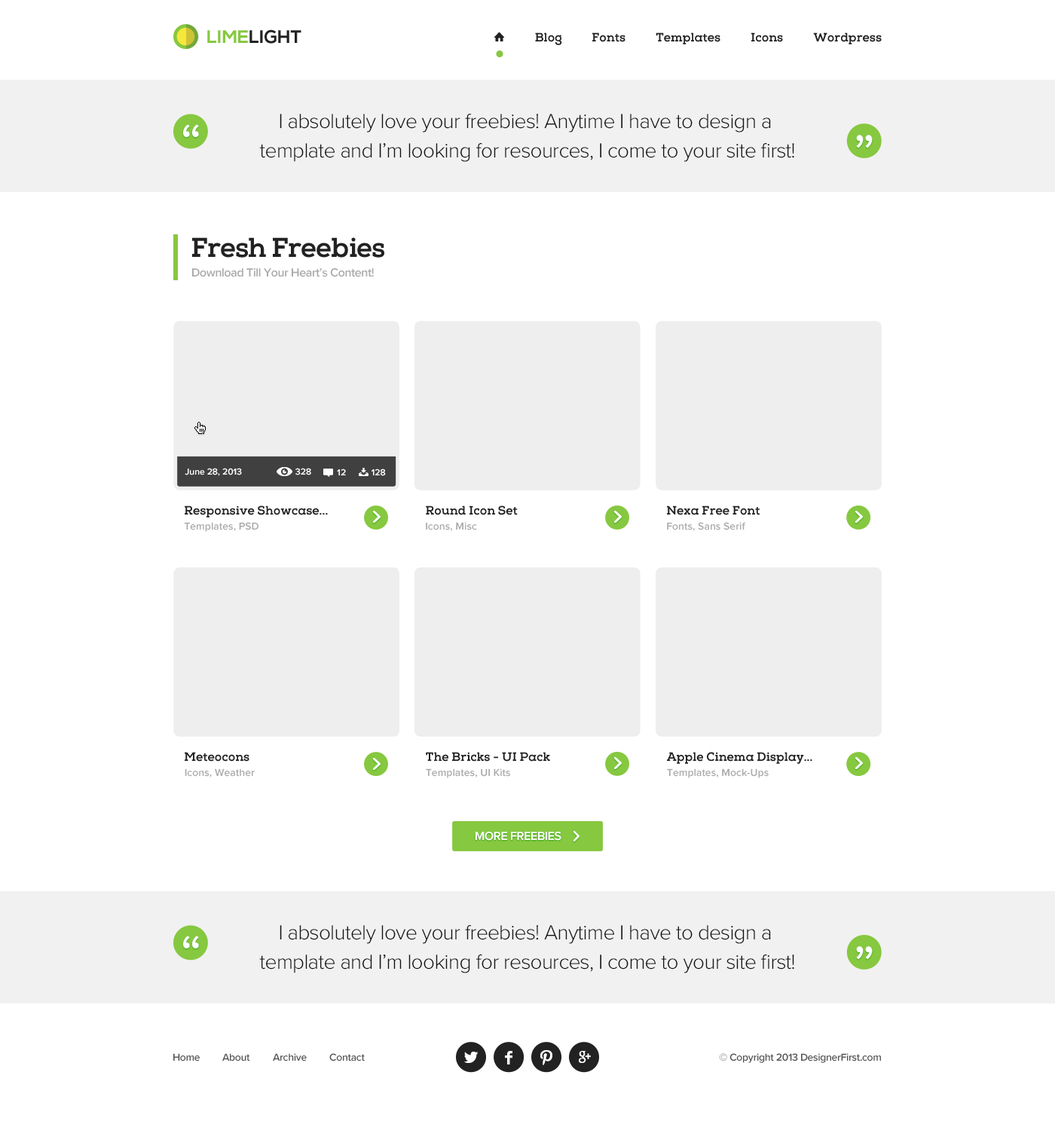
<style>
.page{position:relative;width:1055px;height:1130px;background:#ffffff}
.page>*{position:absolute;margin:0}
.t1{font:18.1px "NexaBold";color:#222222;text-transform:uppercase}
.t2{font:18.1px "NexaBold";color:#86c840;text-transform:uppercase}
.t3{font:12.1px "NexaSlab-xBold";color:#222222}
.t4{font:21.1px "ProximaNova-Light";letter-spacing:-0.025em;color:#111111}
.t5{font:56.5px "ProximaNova-Regular";letter-spacing:-0.025em;color:#ffffff}
.t6{font:27.1px "NexaSlab-xBold";letter-spacing:-0.025em;color:#222222}
.t7{font:12.1px "ProximaNova-Semibold";letter-spacing:-0.025em;color:#aaaaaa}
.t8{font:9px "ProximaNova-Semibold";color:#ffffff}
.t9{font:10.5px "ProximaNova-Semibold";color:#aaaaaa}
.t10{font:12.1px "ProximaNova-Semibold";letter-spacing:-0.025em;color:#ffffff;text-transform:uppercase}
.t11{font:10.5px "ProximaNova-Semibold";letter-spacing:-0.025em;color:#555555}
</style>
<div class="page">
<p class="t1" style="left:207px;top:29px;width:94px;height:15px"><span class="t2">Lime</span>Light</p>
<p class="t3" style="left:535px;top:32px;width:27px;height:13px">Blog</p>
<p class="t3" style="left:592px;top:32px;width:33px;height:10px">Fonts</p>
<p class="t3" style="left:656px;top:32px;width:64px;height:12px">Templates</p>
<p class="t3" style="left:751px;top:32px;width:32px;height:10px">Icons</p>
<p class="t3" style="left:813px;top:32px;width:69px;height:12px">Wordpress</p>
<p class="t4" style="left:259px;top:114px;width:535px;height:48px;text-align:center">I absolutely love your freebies! Anytime I have to design a <br>template and I’m looking for resources, I come to your site first!</p>
<p class="t5" style="left:183px;top:124px;width:16px;height:13px">“</p>
<p class="t5" style="left:856px;top:135px;width:17px;height:13px">”</p>
<p class="t6" style="left:192px;top:237px;width:192px;height:21px">Fresh Freebies</p>
<p class="t7" style="left:192px;top:268px;width:182px;height:9px">Download Till Your Heart’s Content!</p>
<p class="t8" style="left:185px;top:468px;width:57px;height:8px">June 28, 2013</p>
<p class="t8" style="left:295px;top:468px;width:16px;height:7px">328</p>
<p class="t8" style="left:337px;top:469px;width:9px;height:6px">12</p>
<p class="t8" style="left:371px;top:469px;width:15px;height:7px">128</p>
<p class="t3" style="left:185px;top:506px;width:143px;height:12px">Responsive Showcase...</p>
<p class="t3" style="left:426px;top:506px;width:92px;height:9px">Round Icon Set</p>
<p class="t3" style="left:667px;top:506px;width:93px;height:9px">Nexa Free Font</p>
<p class="t9" style="left:184px;top:522px;width:74px;height:10px">Templates, PSD</p>
<p class="t9" style="left:426px;top:522px;width:51px;height:9px">Icons, Misc</p>
<p class="t9" style="left:667px;top:522px;width:78px;height:9px">Fonts, Sans Serif</p>
<p class="t3" style="left:185px;top:752px;width:64px;height:10px">Meteocons</p>
<p class="t3" style="left:426px;top:752px;width:124px;height:10px">The Bricks - UI Pack</p>
<p class="t3" style="left:667px;top:752px;width:145px;height:12px">Apple Cinema Display...</p>
<p class="t9" style="left:185px;top:769px;width:70px;height:9px">Icons, Weather</p>
<p class="t9" style="left:426px;top:769px;width:84px;height:9px">Templates, UI Kits</p>
<p class="t9" style="left:667px;top:769px;width:102px;height:9px">Templates, Mock-Ups</p>
<p class="t10" style="left:475px;top:832px;width:86px;height:9px">More Freebies</p>
<p class="t4" style="left:259px;top:925px;width:535px;height:49px;text-align:center">I absolutely love your freebies! Anytime I have to design a <br>template and I’m looking for resources, I come to your site first!</p>
<p class="t5" style="left:183px;top:936px;width:16px;height:13px">“</p>
<p class="t5" style="left:856px;top:946px;width:17px;height:14px">”</p>
<p class="t11" style="left:173px;top:1053px;width:27px;height:9px">Home</p>
<p class="t11" style="left:222px;top:1053px;width:28px;height:9px">About</p>
<p class="t11" style="left:273px;top:1053px;width:34px;height:9px">Archive</p>
<p class="t11" style="left:329px;top:1053px;width:36px;height:9px">Contact</p>
<p class="t11" style="left:719px;top:1053px;width:162px;height:10px">© Copyright 2013 DesignerFirst.com</p>
</div>
